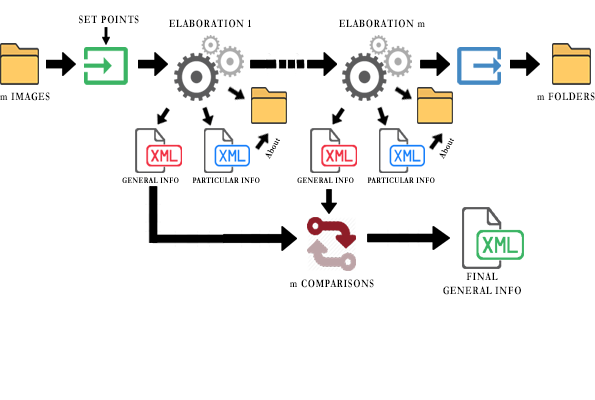
<style>
.page{position:relative;width:595px;height:400px;background:#ffffff}
.page>*{position:absolute;margin:0}
.t1{font:11.2px "Garamond-Bold";letter-spacing:0.07em;color:#000000;scale:0.81 1}
.t2{font:11.2px/14px "Garamond-Bold";letter-spacing:0.07em;color:#000000;scale:0.81 1}
</style>
<div class="page">
<p class="t1" style="left:79px;top:15px;width:60px;height:9px">SET POINTS</p>
<p class="t1" style="left:169px;top:19px;width:82px;height:9px">ELABORATION 1</p>
<p class="t1" style="left:339px;top:19px;width:86px;height:9px">ELABORATION m</p>
<p class="t1" style="left:0px;top:92px;width:50px;height:9px">m IMAGES</p>
<p class="t1" style="left:537px;top:92px;width:58px;height:9px">m FOLDERS</p>
<p class="t1" style="left:290px;top:279px;width:84px;height:9px">m COMPARISONS</p>
<p class="t2" style="left:443px;top:272px;width:78px;height:23px;text-align:center">FINAL<br>GENERAL INFO</p>
</div>
